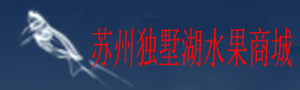
<style>
.page{position:relative;width:300px;height:90px}
.page>*{position:absolute;margin:0}
.t1{font:43.9px "SimSun";color:#f20a0a;scale:0.51 1}
</style>
<div class="page">
<p class="t1" style="left:92px;top:26px;width:201px;height:42px">苏州独墅湖水果商城</p>
</div>
